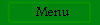
<style>
.page{position:relative;width:100px;height:25px;background:#02850e}
.page>*{position:absolute;margin:0}
.t1{font:13.9px "FootlightMTLight";color:#000000}
</style>
<div class="page">
<p class="t1" style="left:36px;top:7px;width:33px;height:9px">Menu</p>
</div>
